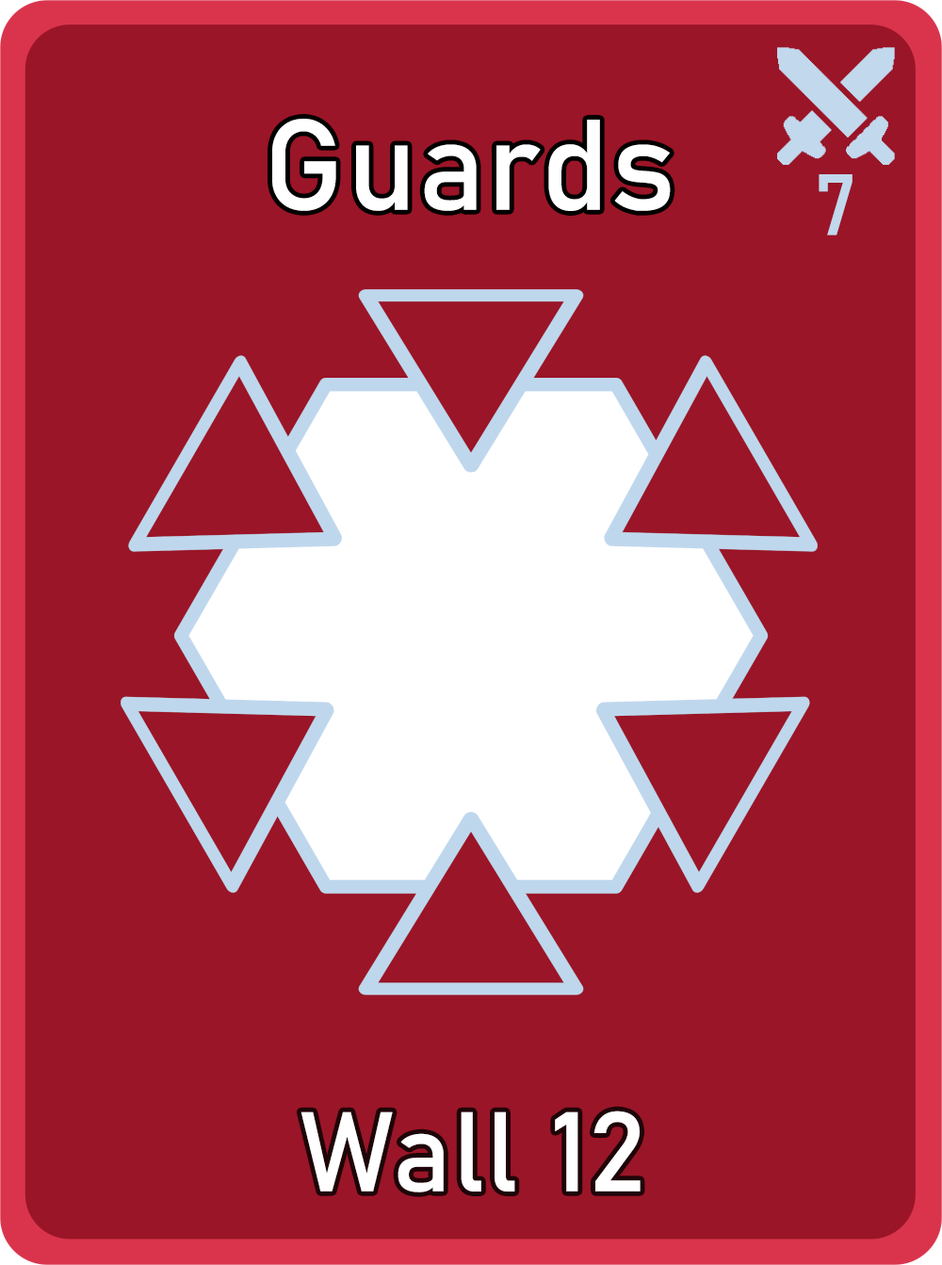
<style>
.page{position:relative;width:942px;height:1265px;background:#9a1527}
.page>*{position:absolute;margin:0}
.t1{font:126.7px "Bahnschrift";letter-spacing:0.01em;color:#ffffff}
.t2{font:85px "Bahnschrift";letter-spacing:0.01em;color:#c1d8ed}
.t3{font:111.3px "Bahnschrift";letter-spacing:0.01em;color:#ffffff}
</style>
<div class="page">
<p class="t1" style="left:272px;top:119px;width:399px;height:92px">Guards</p>
<p class="t2" style="left:819px;top:174px;width:34px;height:62px">7</p>
<p class="t3" style="left:301px;top:1111px;width:340px;height:82px">Wall 12</p>
</div>
